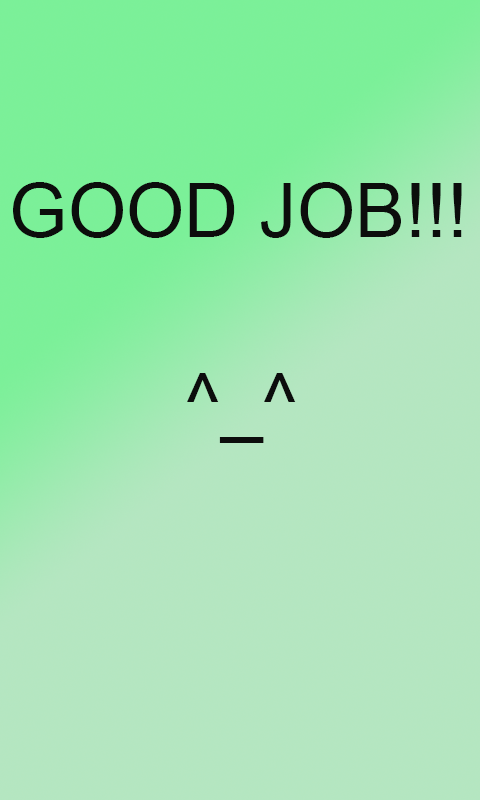
<style>
.page{position:relative;width:480px;height:800px}
.page>*{position:absolute;margin:0}
.t1{font:75px "ArialMT";color:#0c0d0c}
</style>
<div class="page">
<p class="t1" style="left:13px;top:182px;width:449px;height:56px">GOOD JOB!!!</p>
<p class="t1" style="left:187px;top:373px;width:109px;height:70px">^_^</p>
</div>
